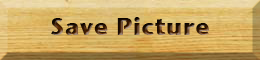
<style>
.page{position:relative;width:260px;height:60px}
.page>*{position:absolute;margin:0}
.t1{font:24px "StoneSansITC-Bold";letter-spacing:0.025em}
</style>
<div class="page">
<p class="t1" style="left:51px;top:17px;width:158px;height:18px">Save Picture</p>
</div>
